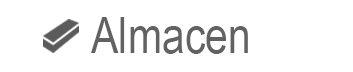
<style>
.page{position:relative;width:353px;height:72px;background:#ffffff}
.page>*{position:absolute;margin:0}
.t1{font:50px "ArialNarrow";color:#626262}
</style>
<div class="page">
<p class="t1" style="left:91px;top:17px;width:157px;height:37px">Almacen</p>
</div>
